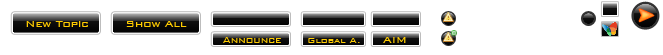
<style>
.page{position:relative;width:663px;height:55px;background:#ffffff}
.page>*{position:absolute;margin:0}
.t1{font:12px "BankGothicBT-Light";color:#ffcc00}
.t2{font:11px "BankGothicBT-Light";color:#ffcc00}
.t3{font:10px "BankGothicBT-Light";color:#ffcc00}
</style>
<div class="page">
<p class="t1" style="left:26px;top:21px;width:62px;height:6px">New Topic</p>
<p class="t1" style="left:126px;top:21px;width:61px;height:6px">Show All</p>
<p class="t2" style="left:223px;top:37px;width:58px;height:6px">Announce</p>
<p class="t3" style="left:308px;top:38px;width:52px;height:5px">Global A.</p>
<p class="t1" style="left:383px;top:37px;width:23px;height:6px">AIM</p>
</div>
